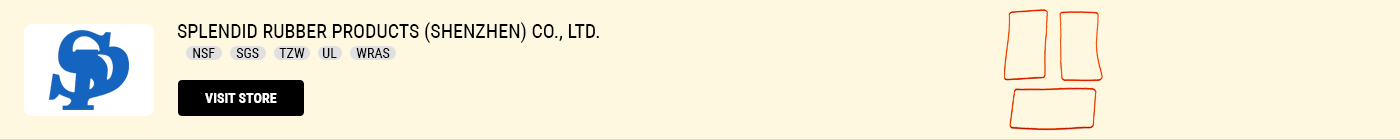
<style>
.page{position:relative;width:1400px;height:140px;background:#fff8e1}
.page>*{position:absolute;margin:0}
.t1{font:20px "RobotoCondensed-Regular";color:#000000;text-transform:uppercase}
.t2{font:14px "RobotoCondensed-Regular";color:#000000;text-transform:uppercase}
.t3{font:14px "RobotoCondensed-Bold";color:#ffffff;text-transform:uppercase}
</style>
<div class="page">
<p class="t1" style="left:177px;top:22px;width:422px;height:21px">Splendid Rubber Products (shenzhen) Co., Ltd.</p>
<p class="t2" style="left:193px;top:48px;width:22px;height:10px">NSF</p>
<p class="t2" style="left:236px;top:48px;width:23px;height:10px">SGS</p>
<p class="t2" style="left:279px;top:48px;width:26px;height:10px">TZW</p>
<p class="t2" style="left:323px;top:48px;width:14px;height:10px">UL</p>
<p class="t2" style="left:356px;top:48px;width:34px;height:10px">WRAS</p>
<p class="t3" style="left:205px;top:93px;width:72px;height:10px">visit store</p>
</div>
